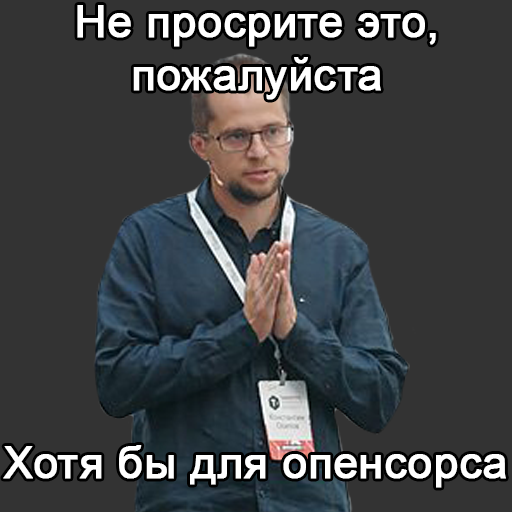
<style>
.page{position:relative;width:512px;height:512px;background:#333333}
.page>*{position:absolute;margin:0}
.t1{font:44px "ArialMT";color:#ffffff;font-weight:bold}
</style>
<div class="page">
<p class="t1" style="left:77px;top:5px;width:359px;height:95px;text-align:center">Не просрите это,<br>пожалуйста</p>
<p class="t1" style="left:3px;top:445px;width:503px;height:43px">Хотя бы для опенсорса</p>
</div>
